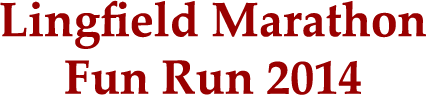
<style>
.page{position:relative;width:426px;height:95px;background:#ffffff}
.page>*{position:absolute;margin:0}
.t1{font:48px "PalatinoLinotype-Bold";color:#990000}
</style>
<div class="page">
<p class="t1" style="left:0px;top:0px;width:426px;height:95px;text-align:center">Lingfield Marathon<br>Fun Run 2014</p>
</div>
